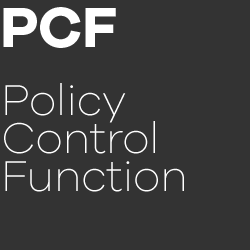
<style>
.page{position:relative;width:250px;height:250px;background:#333333}
.page>*{position:absolute;margin:0}
.t1{font:58.5px "GalanoGrotesque-Bold";letter-spacing:-0.01em;color:#ffffff}
.t2{font:44.5px/38px "GalanoGrotesque-ExtraLight";letter-spacing:-0.01em;color:#ffffff}
</style>
<div class="page">
<p class="t1" style="left:3px;top:7px;width:113px;height:41px">PCF</p>
<p class="t2" style="left:4px;top:83px;width:180px;height:109px">Policy<br>Control<br>Function</p>
</div>
